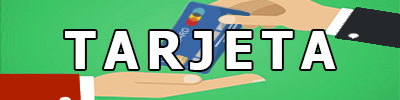
<style>
.page{position:relative;width:400px;height:100px}
.page>*{position:absolute;margin:0}
.t1{font:52px "Tahoma-Bold";letter-spacing:0.16em;color:#ffffff;scale:0.96 1}
</style>
<div class="page">
<p class="t1" style="left:65px;top:31px;width:271px;height:39px">TARJETA</p>
</div>
